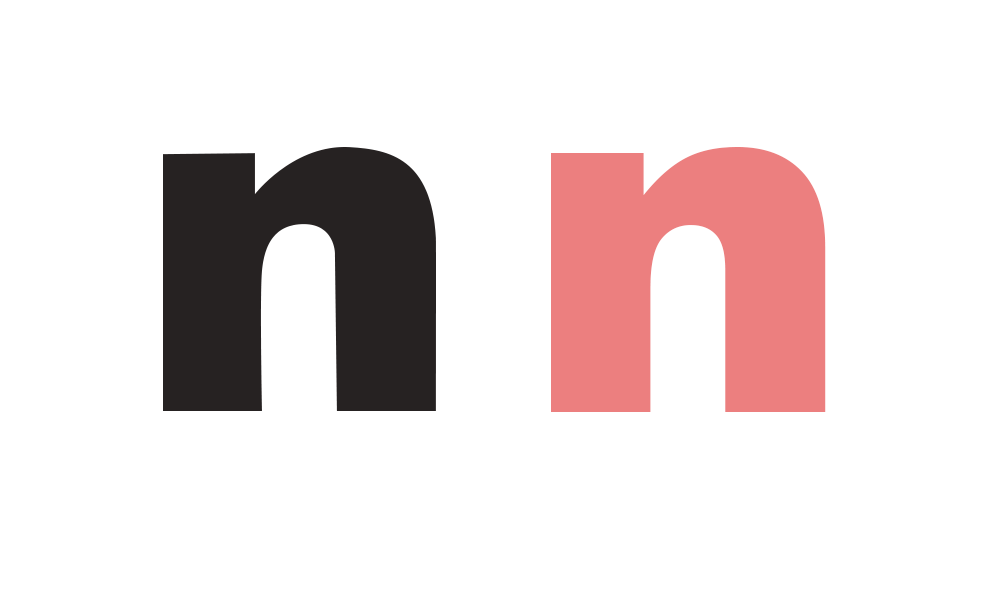
<style>
.page{position:relative;width:1000px;height:600px;background:#ffffff}
.page>*{position:absolute;margin:0}
.t1{font:500px "Arial-Black";color:#ec7f7f}
</style>
<div class="page">
<p class="t1" style="left:551px;top:147px;width:275px;height:265px">n</p>
</div>
